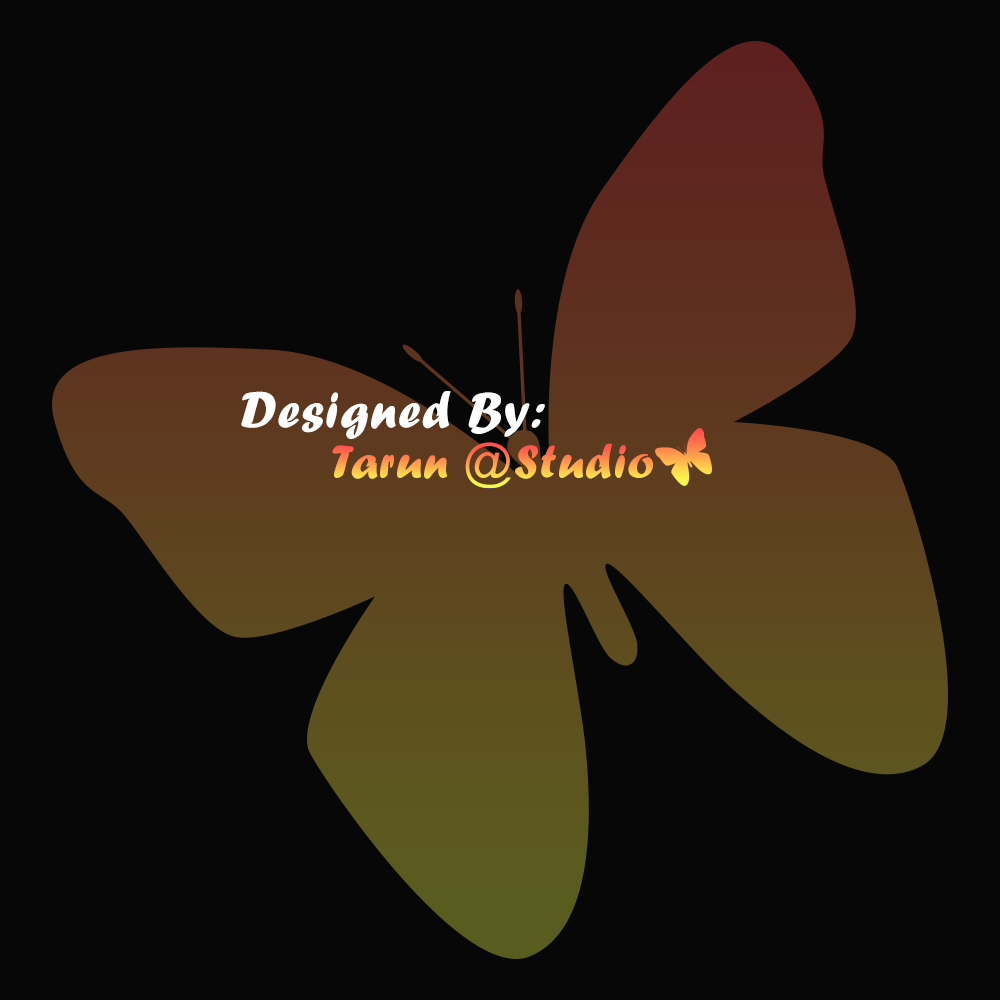
<style>
.page{position:relative;width:1000px;height:1000px;background:#070707}
.page>*{position:absolute;margin:0}
.t1{font:52.3px "ForteMT";letter-spacing:0.025em;color:#ffffff}
.t2{font:48.7px "ForteMT";letter-spacing:0.025em}
</style>
<div class="page">
<p class="t1" style="left:241px;top:391px;width:304px;height:48px">Designed By:</p>
<p class="t2" style="left:332px;top:442px;width:321px;height:47px">Tarun @Studio</p>
</div>
